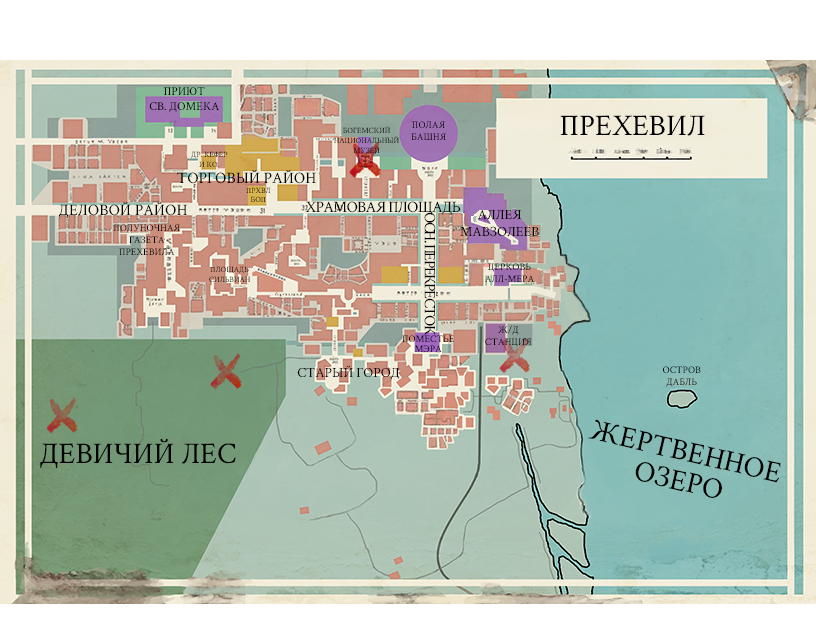
<style>
.page{position:relative;width:816px;height:624px}
.page>*{position:absolute;margin:0}
.t1{font:12px "CrimsonText-Regular";color:#000000}
.t2{font:8px "CrimsonText-Regular"}
.t3{font:10px "CrimsonText-Regular";color:#000000}
.t4{font:30px "CrimsonText-Regular";color:#000000}
.t5{font:16px "CrimsonText-Regular";color:#000000}
.t6{font:16px "CrimsonText-Regular";letter-spacing:-0.05em;color:#000000}
.t7{font:16px "CrimsonText-Regular";letter-spacing:-0.1em;color:#000000}
.t8{font:14px "CrimsonText-Regular";color:#000000}
.t9{font:10px/10px "CrimsonText-Regular";color:#000000}
.t10{font:30px/30px "CrimsonText-Regular";color:#000000}
</style>
<div class="page">
<p class="t1" style="left:149px;top:87px;width:70px;height:25px;text-align:center">ПРИЮТ<br>СВ. ДОМЕКА</p>
<p class="t2" style="left:334px;top:126px;width:65px;height:28px;text-align:center">БОГЕМСКИЙ<br>НАЦИОНАЛЬНЫЙ<br>МУЗЕЙ</p>
<p class="t3" style="left:411px;top:121px;width:35px;height:19px;text-align:center">ПОЛАЯ<br>БАШНЯ</p>
<p class="t4" style="left:560px;top:115px;width:145px;height:21px">ПРЕХЕВИЛ</p>
<p class="t2" style="left:191px;top:151px;width:37px;height:16px;text-align:center">ДР. КЕФЕР<br>И КО.</p>
<p class="t5" style="left:177px;top:170px;width:139px;height:14px">ТОРГОВЫЙ РАЙОН</p>
<p class="t2" style="left:246px;top:187px;width:25px;height:15px;text-align:center">ПРХВЛ<br>БОП</p>
<p class="t5" style="left:59px;top:202px;width:128px;height:16px">ДЕЛОВОЙ РАЙОН</p>
<p class="t6" style="left:305px;top:201px;width:156px;height:14px">ХРАМОВАЯ ПЛОЩАДЬ</p>
<p class="t7" style="left:424px;top:212px;width:14px;height:124px;rotate:90deg">ОСН. ПЕРЕКРЁСТОК</p>
<p class="t8" style="left:460px;top:210px;width:79px;height:27px;text-align:center">АЛЛЕЯ<br>МАВЗОЛЕЕВ</p>
<p class="t3" style="left:113px;top:224px;width:67px;height:32px;text-align:center">ПОЛУНОЧНАЯ<br>ГАЗЕТА<br>ПРЕХЕВИЛА</p>
<p class="t2" style="left:209px;top:266px;width:41px;height:16px;text-align:center">ПЛОЩАДЬ<br>СИЛЬВИАН</p>
<p class="t3" style="left:485px;top:263px;width:49px;height:20px;text-align:center">ЦЕРКОВЬ<br>АЛЛ-МЕРА</p>
<p class="t3" style="left:485px;top:325px;width:47px;height:22px;text-align:center">Ж/Д<br>СТАНЦИЯ</p>
<p class="t9" style="left:402px;top:335px;width:52px;height:17px;text-align:center">ПОМЕСТЬЕ<br>МЭРА</p>
<p class="t8" style="left:297px;top:365px;width:103px;height:15px">СТАРЫЙ ГОРОД</p>
<p class="t3" style="left:663px;top:366px;width:38px;height:21px;text-align:center">ОСТРОВ<br>ДАБЛЬ</p>
<p class="t10" style="left:588px;top:419px;width:193px;height:79px;text-align:center;rotate:13deg">ЖЕРТВЕННОЕ<br>ОЗЕРО</p>
<p class="t4" style="left:40px;top:438px;width:196px;height:30px">ДЕВИЧИЙ ЛЕС</p>
</div>
